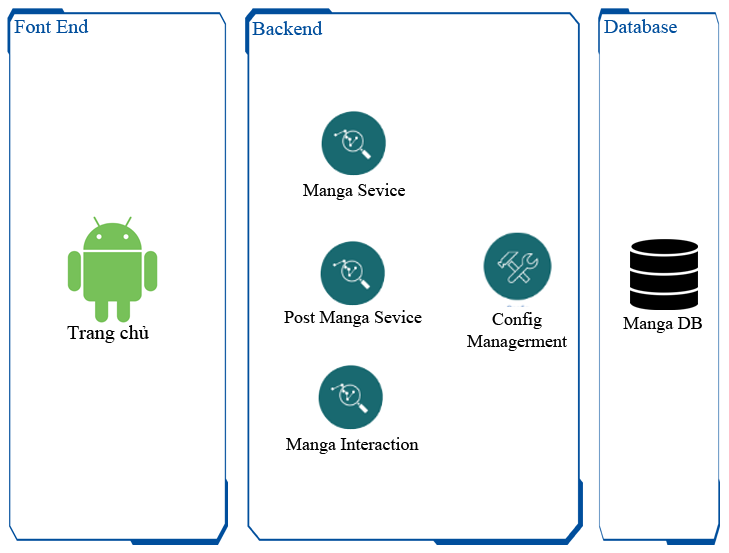
<style>
.page{position:relative;width:729px;height:553px;background:#ffffff}
.page>*{position:absolute;margin:0}
.t1{font:18px "TimesNewRomanPSMT";color:#000000}
.t2{font:20px "TimesNewRomanPSMT";color:#000000}
</style>
<div class="page">
<p class="t1" style="left:303px;top:183px;width:102px;height:17px">Manga Sevice</p>
<p class="t1" style="left:284px;top:310px;width:138px;height:17px">Post Manga Sevice</p>
<p class="t1" style="left:467px;top:312px;width:100px;height:39px;text-align:center">Config<br>Managerment</p>
<p class="t1" style="left:623px;top:317px;width:79px;height:16px">Manga DB</p>
<p class="t2" style="left:67px;top:325px;width:82px;height:18px">Trang chủ</p>
<p class="t1" style="left:286px;top:437px;width:133px;height:17px">Manga Interaction</p>
</div>
